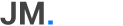
<style>
.page{position:relative;width:123px;height:26px;background:#ffffff}
.page>*{position:absolute;margin:0}
.t1{font:32px "Roboto-Bold";color:#434344}
.t2{font:32px "Roboto-Bold";color:#007bff}
</style>
<div class="page">
<p class="t1" style="left:0px;top:1px;width:53px;height:24px">JM<span class="t2">.</span></p>
</div>
